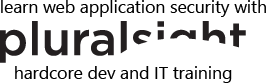
<style>
.page{position:relative;width:280px;height:83px;background:#ffffff}
.page>*{position:absolute;margin:0}
.t1{font:17.5px "SegoeUI";color:#000000}
</style>
<div class="page">
<p class="t1" style="left:1px;top:0px;width:265px;height:17px">learn web application security with</p>
<p class="t1" style="left:15px;top:66px;width:217px;height:17px">hardcore dev and IT training</p>
</div>
